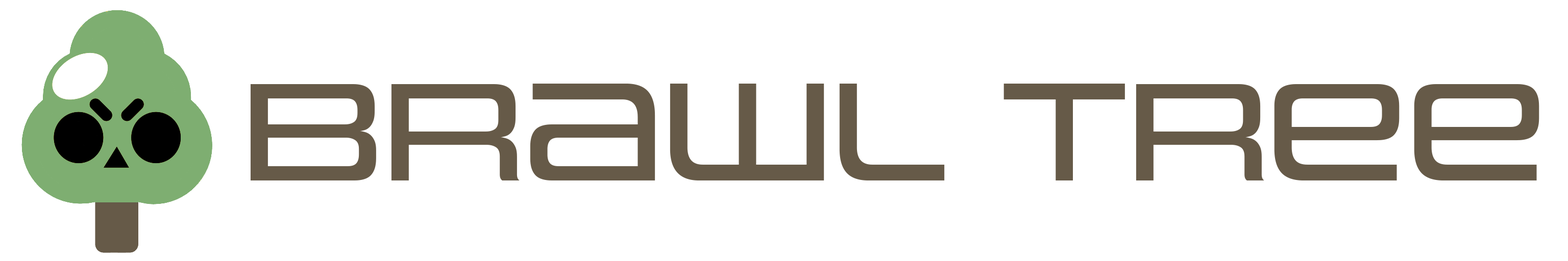
<style>
.page{position:relative;width:1568px;height:261px;background:#ffffff}
.page>*{position:absolute;margin:0}
.t1{font:142.9px "UniwarsW00-Regular";color:#665a48}
</style>
<div class="page">
<p class="t1" style="left:250px;top:84px;width:1289px;height:97px">Brawl Tree</p>
</div>
